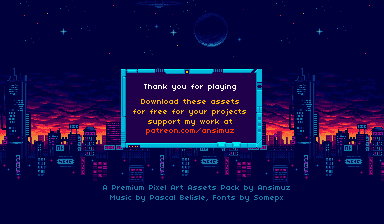
<style>
.page{position:relative;width:384px;height:224px;background:#00003c}
.page>*{position:absolute;margin:0}
.t1{font:8.1px "04b03";color:#ffffff}
.t2{font:8.1px "04b03";color:#ffb900}
.t3{font:8.1px "04b03";color:#ff3600}
.t4{font:8.1px "04b03";color:#177daa}
</style>
<div class="page">
<p class="t1" style="left:144px;top:84px;width:92px;height:7px">Thank you for playing</p>
<p class="t2" style="left:133px;top:99px;width:113px;height:36px;text-align:center">Download these assets<br>for free for your projects<br>support my work at<br><span class="t3">patreon.com/ansimuz</span></p>
<p class="t4" style="left:103px;top:185px;width:187px;height:17px;text-align:center">A Premium Pixel Art Assets Pack by Ansimuz<br>Music by Pascal Belisle, Fonts by Somepx</p>
</div>
